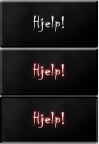
<style>
.page{position:relative;width:99px;height:144px}
.page>*{position:absolute;margin:0}
.t1{font:17.5px "Chiller-Regular";letter-spacing:0.02em}
.t2{font:17.5px "Chiller-Regular";letter-spacing:0.02em;color:#d0d0d0}
</style>
<div class="page">
<p class="t1" style="left:33px;top:15px;width:32px;height:17px">Hjelp!</p>
<p class="t2" style="left:33px;top:63px;width:32px;height:17px">Hjelp!</p>
<p class="t2" style="left:33px;top:111px;width:32px;height:17px">Hjelp!</p>
</div>
